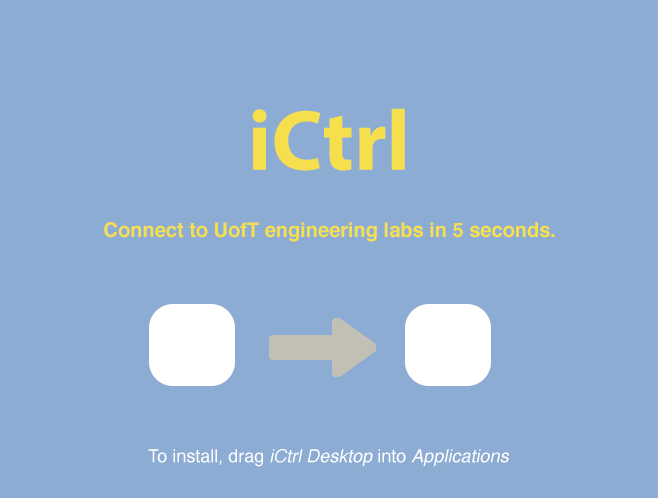
<style>
.page{position:relative;width:658px;height:498px;background:#8cacd3}
.page>*{position:absolute;margin:0}
.t1{font:86px "MyriadPro-Bold";color:#f5df4d}
.t2{font:20px "Helvetica-Bold";color:#f5df4d}
.t3{font:18px "Helvetica";color:#ffffff}
.t4{font:18px "Helvetica";color:#ffffff;font-style:italic}
</style>
<div class="page">
<p class="t1" style="left:252px;top:108px;width:153px;height:63px">iCtrl</p>
<p class="t2" style="left:104px;top:222px;width:451px;height:20px">Connect to UofT engineering labs in 5 seconds.</p>
<p class="t3" style="left:148px;top:449px;width:361px;height:18px">To install, drag <span class="t4">iCtrl Desktop</span> into <span class="t4">Applications</span></p>
</div>
